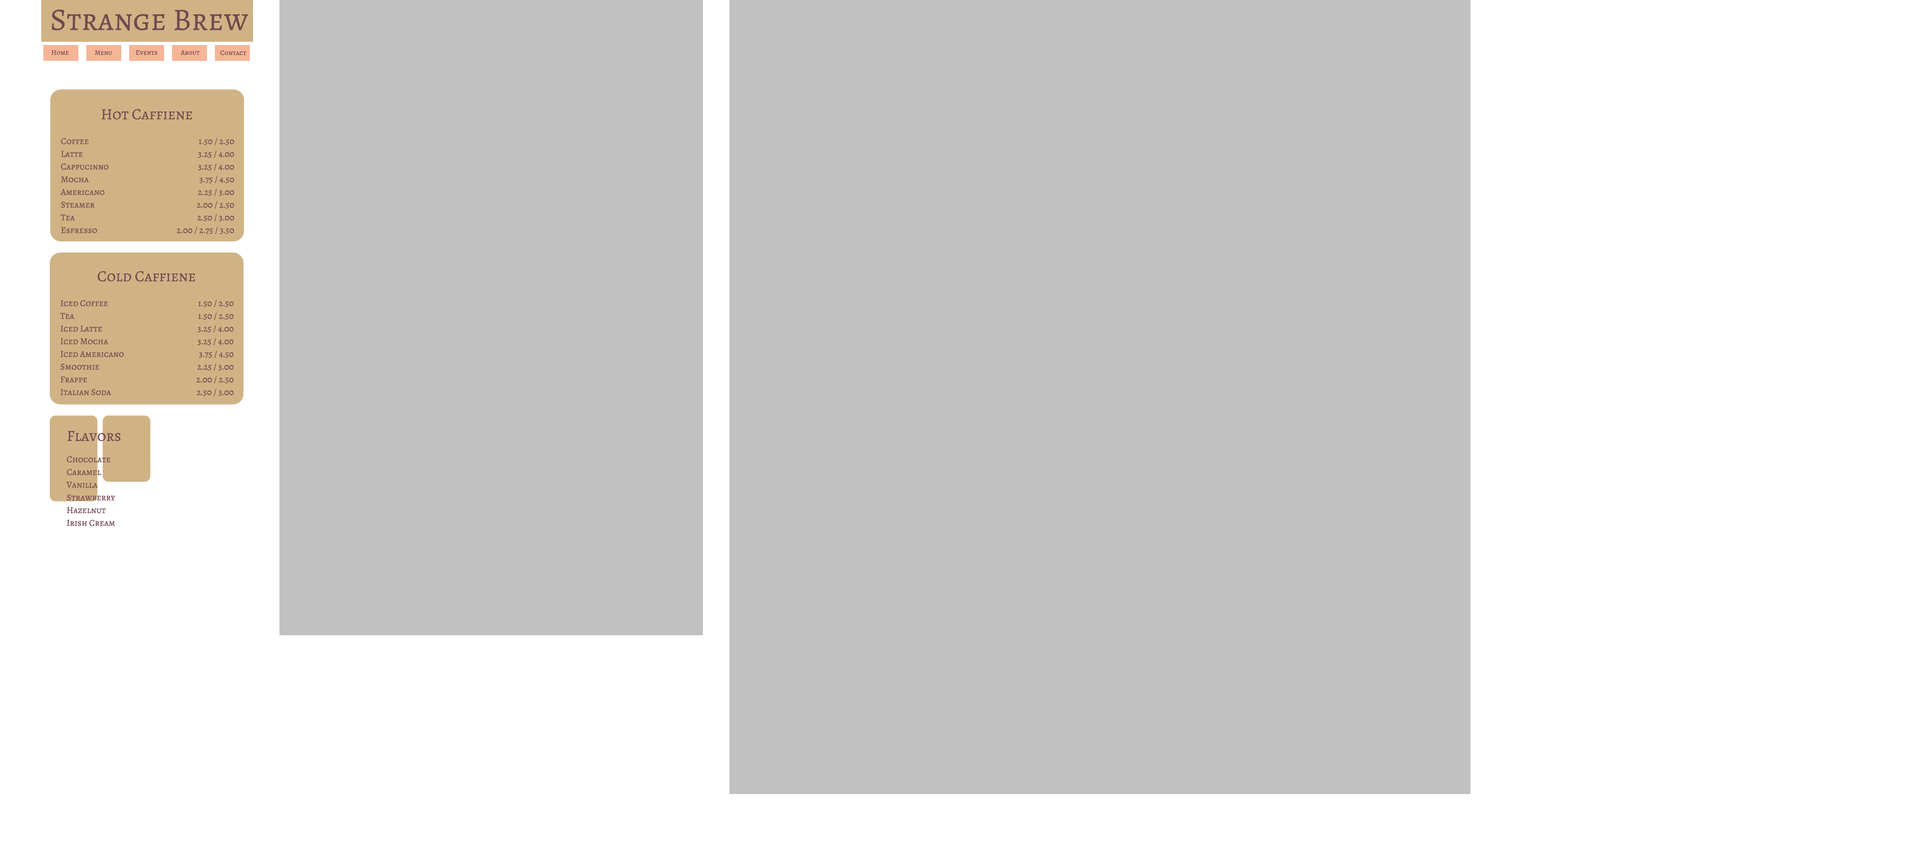
<style>
.page{position:relative;width:1931px;height:847px;background:#c1c1c1}
.page>*{position:absolute;margin:0}
.t1{font:31.2px "AlegreyaSC-Regular";color:#734850}
.t2{font:6.9px "AlegreyaSC-Regular";color:#734850}
.t3{font:15.4px "AlegreyaSC-Regular";color:#734850}
.t4{font:9px/12.7px "AlegreyaSC-Regular";color:#734850}
</style>
<div class="page">
<p class="t1" style="left:51px;top:10px;width:197px;height:21px">Strange Brew</p>
<p class="t2" style="left:51px;top:50px;width:18px;height:5px">Home</p>
<p class="t2" style="left:95px;top:50px;width:17px;height:5px">Menu</p>
<p class="t2" style="left:136px;top:50px;width:21px;height:5px">Events</p>
<p class="t2" style="left:181px;top:50px;width:19px;height:5px">About</p>
<p class="t2" style="left:220px;top:50px;width:27px;height:6px">Contact</p>
<p class="t3" style="left:102px;top:109px;width:90px;height:11px">Hot Caffiene</p>
<p class="t4" style="left:176px;top:138px;width:59px;height:97px;text-align:right">1.50 / 2.50<br>3.25 / 4.00<br>3.25 / 4.00<br>3.75 / 4.50<br>2.25 / 3.00<br>2.00 / 2.50<br>2.50 / 3.00<br>2.00 / 2.75 / 3.50</p>
<p class="t4" style="left:60px;top:138px;width:49px;height:95px">Coffee<br>Latte<br>Cappucinno<br>Mocha<br>Americano<br>Steamer<br>Tea<br>Espresso</p>
<p class="t3" style="left:97px;top:271px;width:98px;height:11px">Cold Caffiene</p>
<p class="t4" style="left:60px;top:300px;width:64px;height:95px">Iced Coffee<br>Tea<br>Iced Latte<br>Iced Mocha<br>Iced Americano<br>Smoothie<br>Frappe<br>Italian Soda</p>
<p class="t4" style="left:196px;top:300px;width:38px;height:97px;text-align:right">1.50 / 2.50<br>1.50 / 2.50<br>3.25 / 4.00<br>3.25 / 4.00<br>3.75 / 4.50<br>2.25 / 3.00<br>2.00 / 2.50<br>2.50 / 3.00</p>
<p class="t3" style="left:67px;top:430px;width:54px;height:12px">Flavors</p>
<p class="t4" style="left:66px;top:456px;width:49px;height:70px">Chocolate<br>Caramel<br>Vanilla<br>Strawberry<br>Hazelnut<br>Irish Cream</p>
</div>
